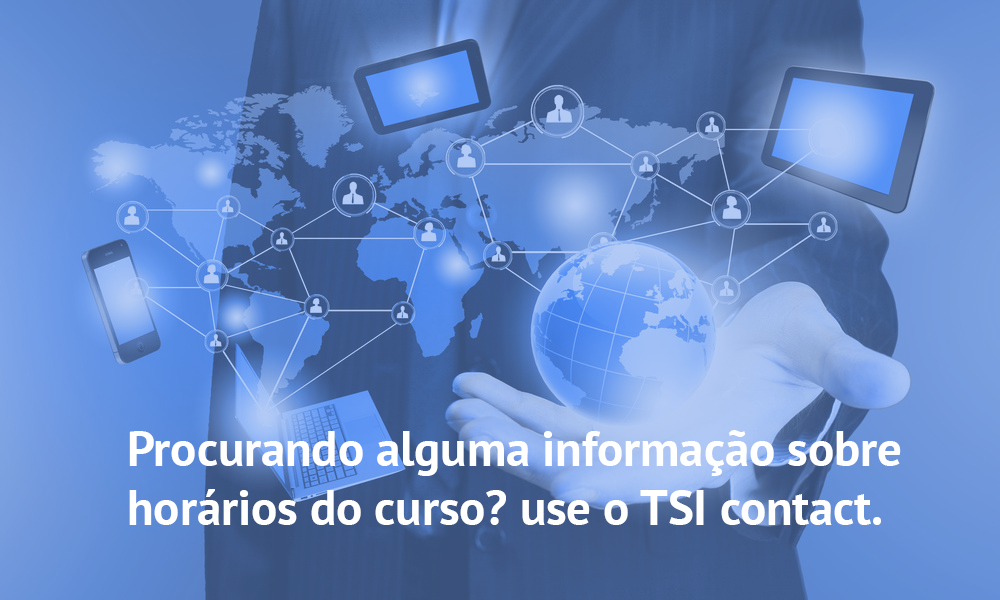
<style>
.page{position:relative;width:1000px;height:600px}
.page>*{position:absolute;margin:0}
.t1{font:48.7px "PTSans-Bold";color:#ffffff}
</style>
<div class="page">
<p class="t1" style="left:129px;top:430px;width:772px;height:95px">Procurando alguma informação sobre horários do curso? use o TSI contact.</p>
</div>
